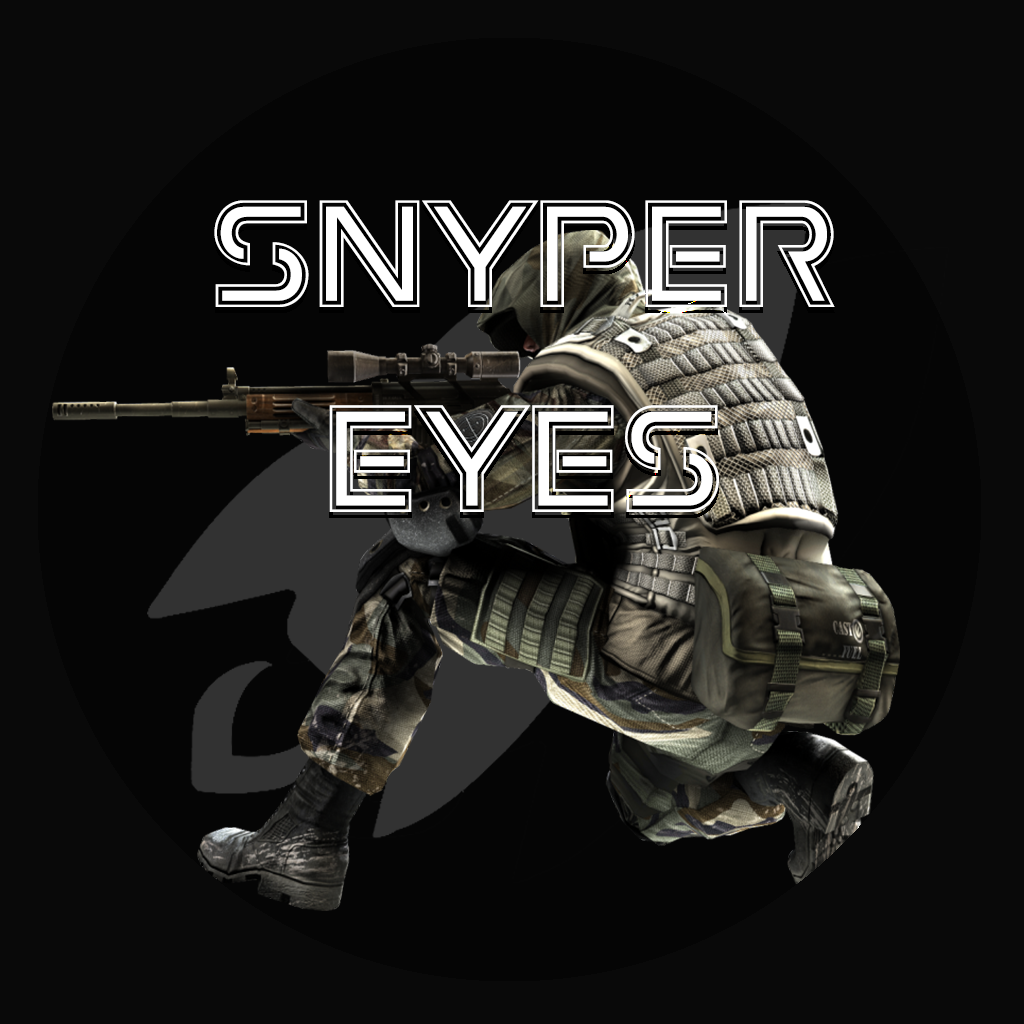
<style>
.page{position:relative;width:1024px;height:1024px;background:#090909}
.page>*{position:absolute;margin:0}
.t1{font:170.7px "EarthOrbiterAcademy";color:#ffffff}
</style>
<div class="page">
<p class="t1" style="left:214px;top:200px;width:621px;height:312px;text-align:center">Snyper<br>Eyes</p>
</div>
